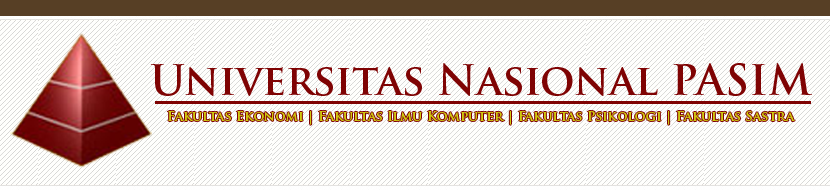
<style>
.page{position:relative;width:830px;height:190px;background:#fffffd}
.page>*{position:absolute;margin:0}
.t1{font:13.3px "TrajanPro-Bold";color:#cfc80f}
</style>
<div class="page">
<p class="t1" style="left:167px;top:111px;width:628px;height:14px">Fakultas Ekonomi | Fakultas Ilmu Komputer | Fakultas Psikologi | Fakultas Sastra</p>
</div>
